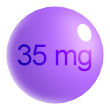
<style>
.page{position:relative;width:110px;height:110px;background:#ffffff}
.page>*{position:absolute;margin:0}
.t1{font:29.3px "ArialMT";letter-spacing:-0.04em}
</style>
<div class="page">
<p class="t1" style="left:17px;top:44px;width:75px;height:28px">35 mg</p>
</div>
